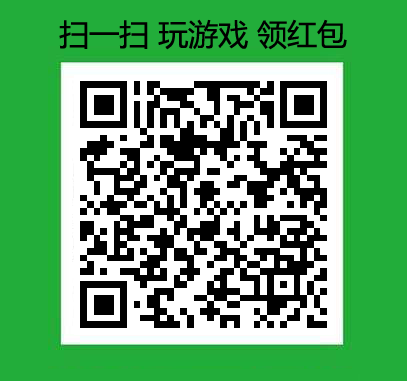
<style>
.page{position:relative;width:407px;height:381px;background:#22ad3a}
.page>*{position:absolute;margin:0}
.t1{font:30px "MicrosoftYaHei";color:#000000}
</style>
<div class="page">
<p class="t1" style="left:59px;top:19px;width:288px;height:31px">扫一扫 玩游戏 领红包</p>
</div>
